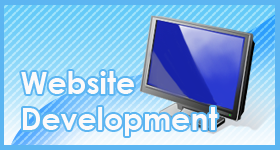
<style>
.page{position:relative;width:280px;height:150px}
.page>*{position:absolute;margin:0}
.t1{font:30px "CenturyGothic-Bold";color:#fcfafa}
</style>
<div class="page">
<p class="t1" style="left:21px;top:71px;width:197px;height:65px">Website<br>Development</p>
</div>
